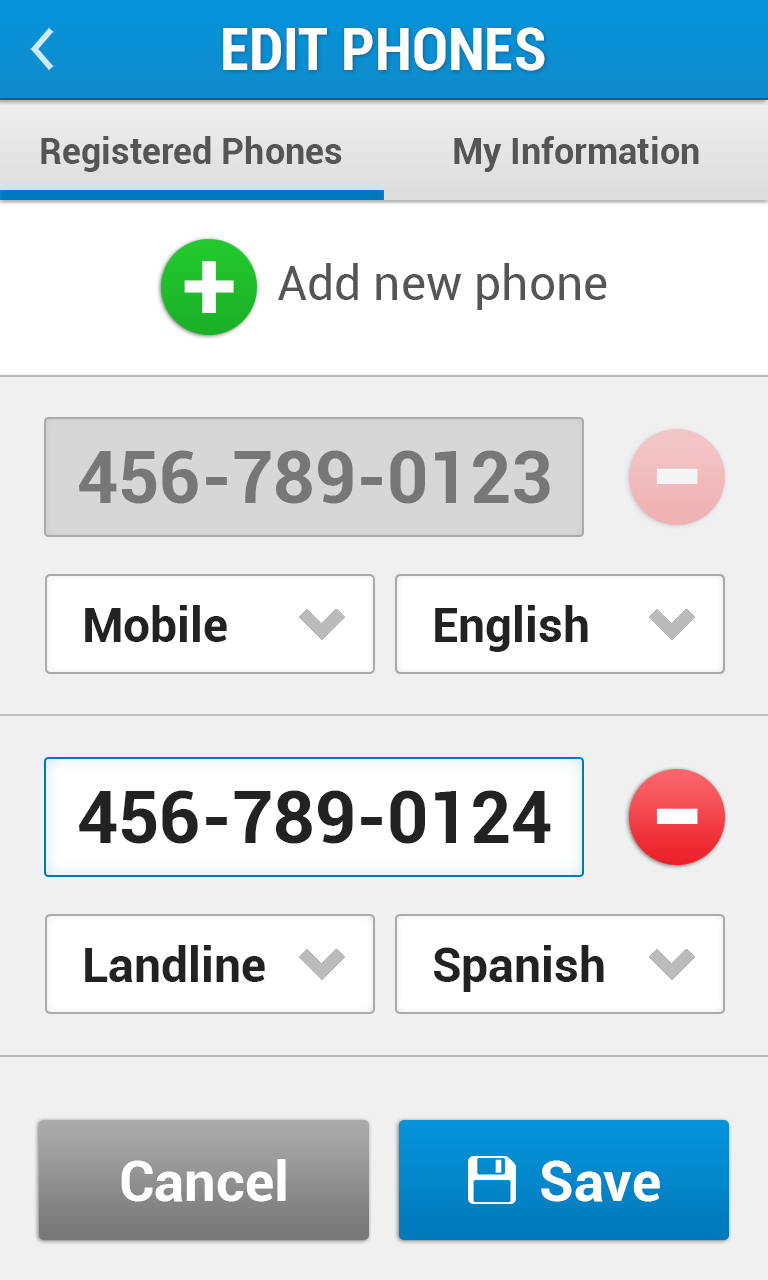
<style>
.page{position:relative;width:768px;height:1280px;background:#f0f0f0}
.page>*{position:absolute;margin:0}
.t1{font:60px "Roboto-BoldCondensed";color:#ffffff}
.t2{font:36px "Roboto-Bold";color:#555555}
.t3{font:100px "Roboto-Bold";color:#ffffff}
.t4{font:48px "Roboto-Regular";color:#555555}
.t5{font:72px "Roboto-Bold";color:#777777}
.t6{font:140px "Roboto-Bold";color:#ffffff}
.t7{font:48px "Roboto-Bold";color:#222222}
.t8{font:72px "Roboto-Bold";color:#222222}
.t9{font:56px "Roboto-Bold";color:#ffffff}
</style>
<div class="page">
<p class="t1" style="left:223px;top:27px;width:322px;height:44px">EDIT PHONES</p>
<p class="t2" style="left:41px;top:136px;width:301px;height:36px">Registered Phones</p>
<p class="t2" style="left:454px;top:136px;width:245px;height:36px">My Information</p>
<p class="t3" style="left:184px;top:261px;width:50px;height:52px">+</p>
<p class="t4" style="left:278px;top:263px;width:329px;height:47px">Add new phone</p>
<p class="t5" style="left:79px;top:450px;width:471px;height:54px">456-789-0123</p>
<p class="t6" style="left:656px;top:468px;width:42px;height:16px">-</p>
<p class="t7" style="left:85px;top:605px;width:142px;height:37px">Mobile</p>
<p class="t7" style="left:435px;top:605px;width:153px;height:47px">English</p>
<p class="t8" style="left:79px;top:790px;width:472px;height:54px">456-789-0124</p>
<p class="t6" style="left:656px;top:808px;width:42px;height:16px">-</p>
<p class="t7" style="left:85px;top:945px;width:180px;height:37px">Landline</p>
<p class="t7" style="left:434px;top:945px;width:170px;height:47px">Spanish</p>
<p class="t9" style="left:121px;top:1159px;width:165px;height:43px">Cancel</p>
<p class="t9" style="left:541px;top:1160px;width:119px;height:42px">Save</p>
</div>
